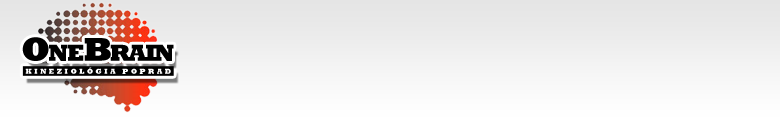
<style>
.page{position:relative;width:780px;height:120px}
.page>*{position:absolute;margin:0}
.t1{font:33.6px "Rockwell-ExtraBold";letter-spacing:-0.06em;color:#000000;font-variant:small-caps}
.t2{font:7.2px "Rockwell-ExtraBold";letter-spacing:0.36em;color:#ffffff}
</style>
<div class="page">
<p class="t1" style="left:22px;top:37px;width:152px;height:24px">OneBrain</p>
<p class="t2" style="left:25px;top:67px;width:146px;height:7px">KINEZIOLÓGIA POPRAD</p>
</div>
